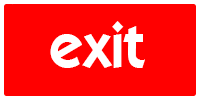
<style>
.page{position:relative;width:200px;height:100px;background:#ff0000}
.page>*{position:absolute;margin:0}
.t1{font:60px "ELEGANCE";color:#ffffff}
</style>
<div class="page">
<p class="t1" style="left:50px;top:21px;width:95px;height:47px">exit</p>
</div>
